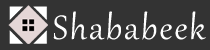
<style>
.page{position:relative;width:210px;height:50px;background:#333333}
.page>*{position:absolute;margin:0}
.t1{font:41.4px "Gabriola";letter-spacing:0.05em;color:#ffffff}
</style>
<div class="page">
<p class="t1" style="left:53px;top:11px;width:153px;height:29px">Shababeek</p>
</div>
